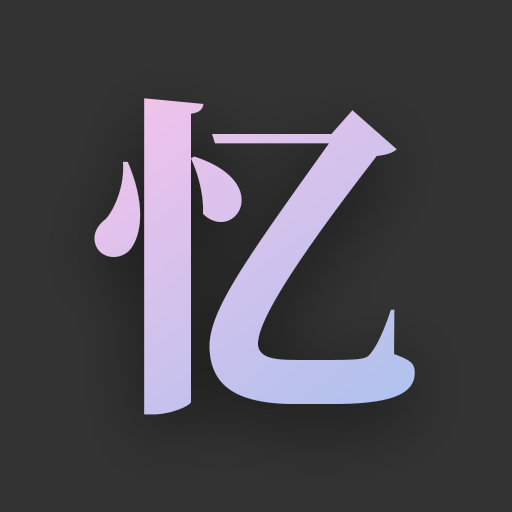
<style>
.page{position:relative;width:512px;height:512px;background:#333333}
.page>*{position:absolute;margin:0}
.t1{font:333.3px "SourceHanSerifSC-Heavy";color:#d1c2ec}
</style>
<div class="page">
<p class="t1" style="left:94px;top:98px;width:321px;height:317px">忆</p>
</div>
